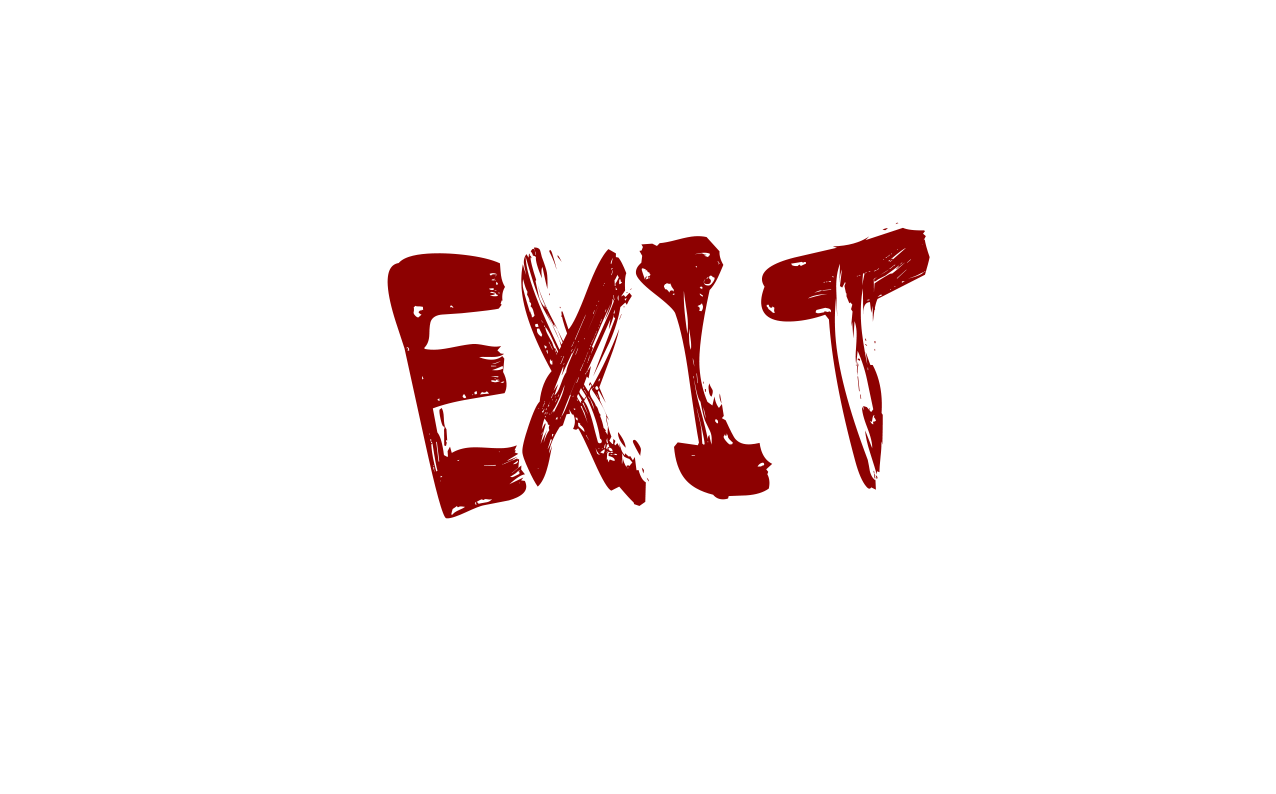
<style>
.page{position:relative;width:1276px;height:794px;background:#ffffff}
.page>*{position:absolute;margin:0}
.t1{font:264.9px "Brushed";color:#8d0101}
</style>
<div class="page">
<p class="t1" style="left:387px;top:222px;width:543px;height:297px;rotate:-4deg">exit</p>
</div>
